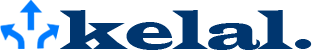
<style>
.page{position:relative;width:324px;height:52px;background:#ffffff}
.page>*{position:absolute;margin:0}
.t1{font:55px "LatinWide";color:#00366f}
</style>
<div class="page">
<p class="t1" style="left:60px;top:10px;width:252px;height:40px">kelal.</p>
</div>
